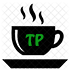
<style>
.page{position:relative;width:70px;height:70px;background:#ffffff}
.page>*{position:absolute;margin:0}
.t1{font:14px "HoboStd";color:#0f9e1c}
</style>
<div class="page">
<p class="t1" style="left:25px;top:34px;width:19px;height:12px">TP</p>
</div>
